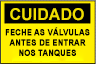
<style>
.page{position:relative;width:96px;height:64px;background:#ffef00}
.page>*{position:absolute;margin:0}
.t1{font:16.2px "Arial-BoldMT";letter-spacing:0.005em;color:#efde00}
.t2{font:8.7px/10.3px "Arial-BoldMT";letter-spacing:0.005em;color:#020200;font-weight:bold;scale:0.88 1}
</style>
<div class="page">
<p class="t1" style="left:10px;top:8px;width:74px;height:13px">CUIDADO</p>
<p class="t2" style="left:5px;top:27px;width:85px;height:30px;text-align:center">FECHE AS VÁLVULAS<br>ANTES DE ENTRAR<br>NOS TANQUES</p>
</div>
